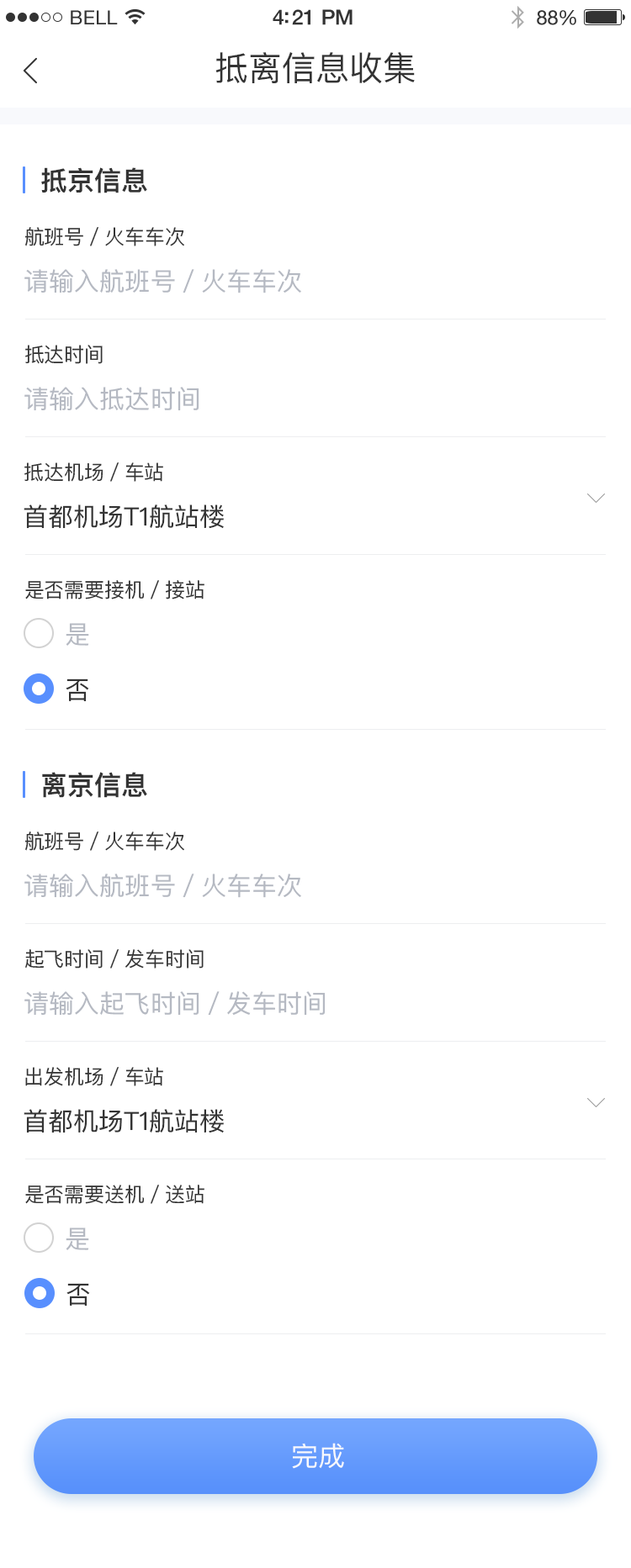
<style>
.page{position:relative;width:631px;height:1568px;background:#ffffff}
.page>*{position:absolute;margin:0}
.t1{font:19.3px "HelveticaNeue";letter-spacing:0.02em;color:#333333}
.t2{font:21px "HelveticaNeue-Medium";letter-spacing:-0.02em;color:#333333}
.t3{font:20.2px "HelveticaNeue";letter-spacing:-0.02em;color:#333333}
.t4{font:33.6px "PingFangSC-Regular";color:#333333}
.t5{font:26.9px "PingFangSC-Semibold";color:#333333}
.t6{font:20.2px "PingFangSC-Regular";color:#333333}
.t7{font:25.2px "PingFangSC-Regular";color:#b5b9c2}
.t8{font:25.2px "PingFangSC-Regular";color:#333333}
.t9{font:25.3px "PingFangSC-Regular";color:#b5b9c2}
.t10{font:26.9px "PingFangSC-Regular";color:#f8f9fc}
</style>
<div class="page">
<p class="t1" style="left:71px;top:10px;width:47px;height:14px">BELL</p>
<p class="t2" style="left:272px;top:9px;width:80px;height:16px">4:21 PM</p>
<p class="t3" style="left:536px;top:10px;width:40px;height:15px">88%</p>
<p class="t4" style="left:215px;top:52px;width:199px;height:32px">抵离信息收集</p>
<p class="t5" style="left:41px;top:167px;width:106px;height:26px">抵京信息</p>
<p class="t6" style="left:25px;top:227px;width:159px;height:19px">航班号／火车车次</p>
<p class="t7" style="left:24px;top:269px;width:277px;height:24px">请输入航班号／火车车次</p>
<p class="t6" style="left:25px;top:345px;width:78px;height:19px">抵达时间</p>
<p class="t7" style="left:24px;top:387px;width:175px;height:24px">请输入抵达时间</p>
<p class="t6" style="left:24px;top:462px;width:139px;height:20px">抵达机场／车站</p>
<p class="t8" style="left:24px;top:504px;width:200px;height:25px">首都机场T1航站楼</p>
<p class="t6" style="left:25px;top:580px;width:179px;height:19px">是否需要接机／接站</p>
<p class="t9" style="left:66px;top:623px;width:23px;height:23px">是</p>
<p class="t8" style="left:66px;top:678px;width:23px;height:23px">否</p>
<p class="t5" style="left:42px;top:772px;width:105px;height:26px">离京信息</p>
<p class="t6" style="left:25px;top:832px;width:159px;height:19px">航班号／火车车次</p>
<p class="t7" style="left:24px;top:874px;width:277px;height:24px">请输入航班号／火车车次</p>
<p class="t6" style="left:25px;top:949px;width:178px;height:20px">起飞时间／发车时间</p>
<p class="t7" style="left:24px;top:991px;width:301px;height:25px">请输入起飞时间／发车时间</p>
<p class="t6" style="left:25px;top:1067px;width:138px;height:19px">出发机场／车站</p>
<p class="t8" style="left:24px;top:1109px;width:200px;height:24px">首都机场T1航站楼</p>
<p class="t6" style="left:25px;top:1185px;width:179px;height:19px">是否需要送机／送站</p>
<p class="t9" style="left:66px;top:1227px;width:23px;height:23px">是</p>
<p class="t8" style="left:66px;top:1283px;width:24px;height:23px">否</p>
<p class="t10" style="left:292px;top:1443px;width:52px;height:26px">完成</p>
</div>
